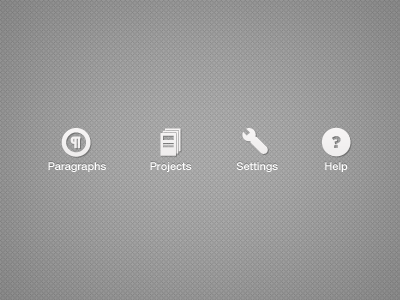
<style>
.page{position:relative;width:400px;height:300px}
.page>*{position:absolute;margin:0}
.t1{font:11px "HelveticaNeue-Medium";color:#ffffff}
</style>
<div class="page">
<p class="t1" style="left:48px;top:162px;width:58px;height:10px">Paragraphs</p>
<p class="t1" style="left:150px;top:162px;width:42px;height:10px">Projects</p>
<p class="t1" style="left:236px;top:162px;width:42px;height:10px">Settings</p>
<p class="t1" style="left:325px;top:162px;width:23px;height:10px">Help</p>
</div>
